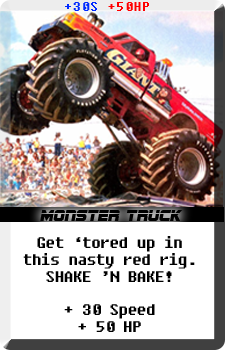
<style>
.page{position:relative;width:225px;height:350px;background:#ffffff}
.page>*{position:absolute;margin:0}
.t1{font:13.9px "Fixedsys";color:#ff0000}
.t2{font:13.9px "Fixedsys";color:#002aff}
.t3{font:16.7px "SFSportsNight";color:#010000}
.t4{font:14px "Fixedsys";color:#000000;scale:1.04 1}
</style>
<div class="page">
<p class="t1" style="left:65px;top:2px;width:84px;height:9px"><span class="t2">+30S </span>+50HP</p>
<p class="t3" style="left:40px;top:210px;width:143px;height:11px">Monster Truck</p>
<p class="t4" style="left:23px;top:236px;width:172px;height:96px;text-align:center">Get ‘tored up in this nasty red rig. <br>SHAKE ’N BAKE!<br><br>+ 30 Speed<br>+ 50 HP</p>
</div>
